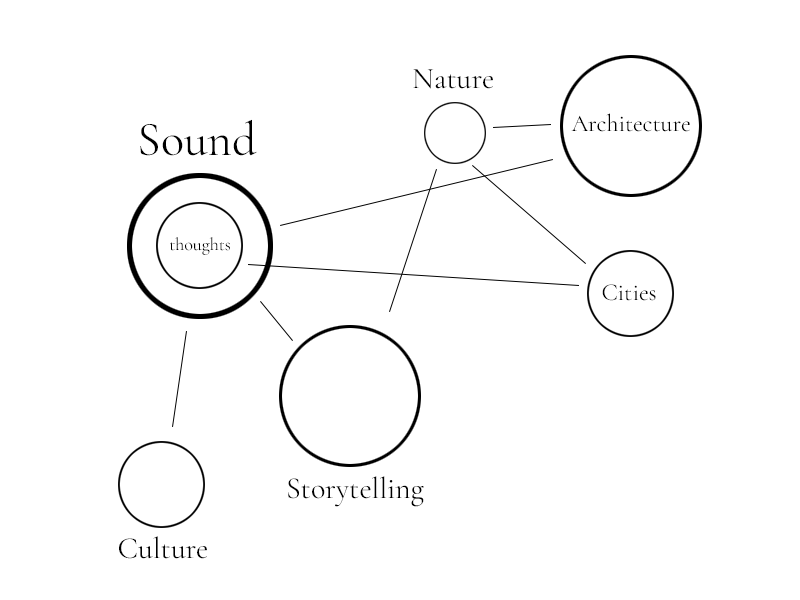
<style>
.page{position:relative;width:800px;height:600px;background:#ffffff}
.page>*{position:absolute;margin:0}
.t1{font:30px "CormorantGaramond-Regular";color:#000000}
.t2{font:24px "CormorantGaramond-Regular";color:#000000}
.t3{font:48px "CormorantGaramond-Regular";color:#000000}
.t4{font:18px "CormorantGaramond-Regular";color:#000000}
</style>
<div class="page">
<p class="t1" style="left:413px;top:69px;width:80px;height:20px">Nature</p>
<p class="t2" style="left:571px;top:113px;width:119px;height:19px">Architecture</p>
<p class="t3" style="left:140px;top:119px;width:117px;height:37px">Sound</p>
<p class="t4" style="left:170px;top:237px;width:60px;height:18px">thoughts</p>
<p class="t2" style="left:602px;top:284px;width:54px;height:17px">Cities</p>
<p class="t1" style="left:288px;top:476px;width:136px;height:31px">Storytelling</p>
<p class="t1" style="left:119px;top:536px;width:88px;height:23px">Culture</p>
</div>
